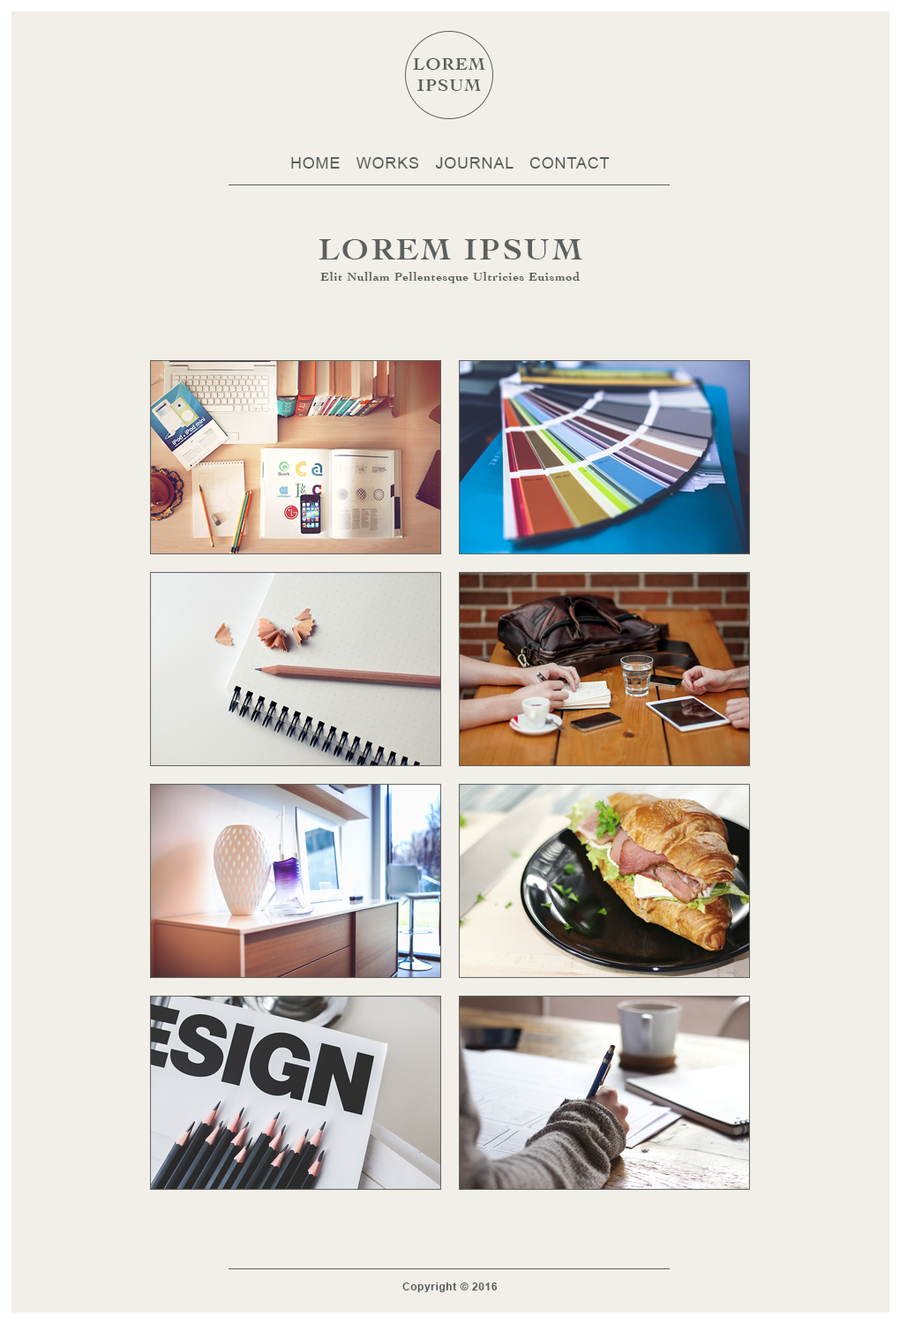
<style>
.page{position:relative;width:900px;height:1324px;background:#f2efe8}
.page>*{position:absolute;margin:0}
.t1{font:17.8px/21.4px "Cochin-Bold";letter-spacing:0.05em;color:#5c605f}
.t2{font:15.7px "ArialMT";letter-spacing:0.05em;color:#5c605f;text-transform:uppercase}
.t3{font:12.4px/21.3px "Cochin-Bold";letter-spacing:0.05em;color:#5c605f}
.t4{font:31.9px/26.6px "Cochin-Bold";letter-spacing:0.075em;color:#5c605f;text-transform:uppercase}
.t5{font:10.7px "Arial-BoldMT";letter-spacing:0.05em;color:#5c605f}
</style>
<div class="page">
<p class="t1" style="left:413px;top:58px;width:73px;height:33px;text-align:center">LOREM<br>IPSUM</p>
<p class="t2" style="left:291px;top:157px;width:319px;height:12px">Home   Works   Journal   Contact</p>
<p class="t3" style="left:319px;top:239px;width:264px;height:44px;text-align:center"><span class="t4">Lorem Ipsum<br></span>Elit Nullam Pellentesque Ultricies Euismod</p>
<p class="t5" style="left:403px;top:1283px;width:95px;height:9px">Copyright © 2016</p>
</div>
